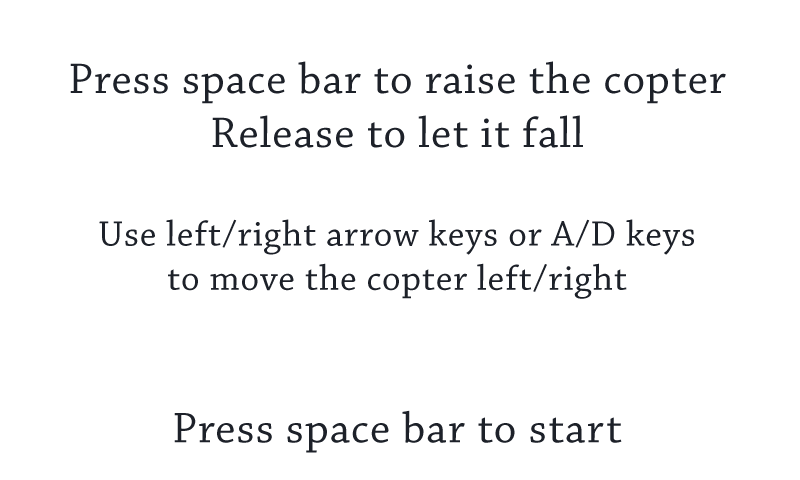
<style>
.page{position:relative;width:800px;height:480px;background:#ffffff}
.page>*{position:absolute;margin:0}
.t1{font:37px "ChaparralPro-Regular";letter-spacing:0.025em;color:#1d2129}
.t2{font:45px "ChaparralPro-Regular";letter-spacing:0.025em;color:#1d2129}
</style>
<div class="page">
<p class="t1" style="left:70px;top:61px;width:656px;height:392px;text-align:center"><span class="t2">Press space bar to raise the copter<br>Release to let it fall<br><br></span>Use left/right arrow keys or A/D keys<br>to move the copter left/right<br><br><span class="t2"><br>Press space bar to start</span></p>
</div>
